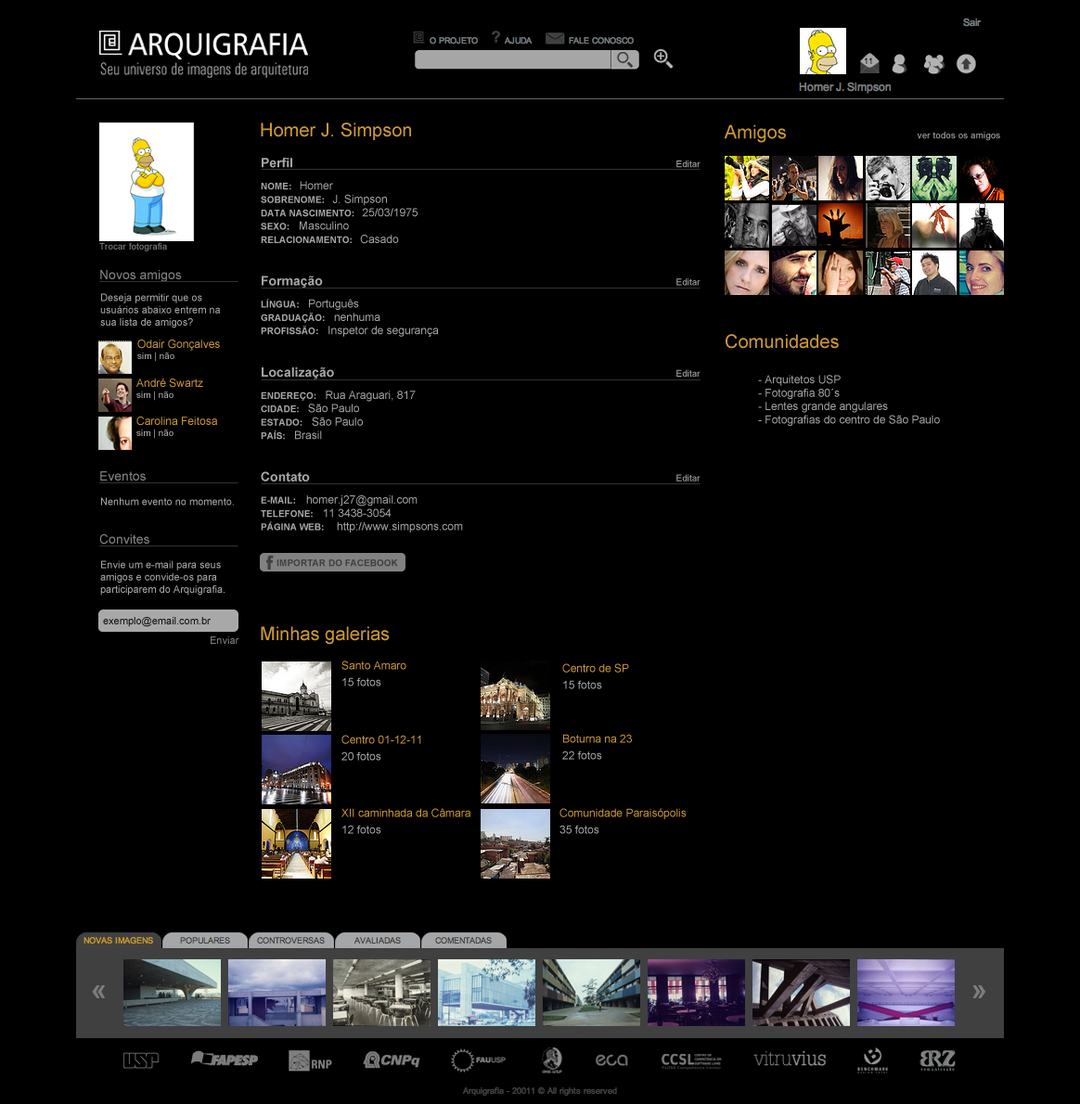
<style>
.page{position:relative;width:1080px;height:1104px;background:#000000}
.page>*{position:absolute;margin:0}
.t1{font:18.6px "ArialMT";color:#cb9833}
.t2{font:11.1px "ArialMT";color:#a6a6a6}
.t3{font:13px "Arial-BoldMT";color:#a6a6a6}
.t4{font:9.3px "ArialMT";color:#a6a6a6}
.t5{font:9.3px/22.3px "Arial-BoldMT";color:#a6a6a6}
.t6{font:11.1px/22.3px "ArialMT";color:#a6a6a6}
.t7{font:9.3px "Arial-BoldMT";color:#a6a6a6;text-transform:uppercase}
.t8{font:9.3px/22.3px "Arial-BoldMT";color:#a6a6a6;text-transform:uppercase}
.t9{font:9.3px "ArialMT";color:#818181}
.t10{font:13px "ArialMT";color:#818181}
.t11{font:10.2px "ArialMT";color:#a6a6a6}
.t12{font:11.1px "ArialMT";color:#cb9833}
.t13{font:10.2px "ArialMT";color:#111111}
.t14{font:10.2px "ArialMT";color:#818181}
.t15{font:11.1px/16.7px "ArialMT";color:#a8a8a8}
</style>
<div class="page">
<p class="t1" style="left:261px;top:122px;width:150px;height:18px">Homer J. Simpson</p>
<p class="t2" style="left:261px;top:158px;width:440px;height:375px"><span class="t3">Perfil                </span><span class="t4">Editar<br></span><span class="t5">NOME:   </span><span class="t6">Homer <br></span><span class="t7">Sobrenome:   </span>J. Simpson<br><span class="t7">Data Nascimento:   </span>25/03/1975 <br><span class="t7">Sexo:</span>   Masculino<br><span class="t7">Relacionamento:   </span>Casado<br><br><br><span class="t3">Formação               </span><span class="t4">Editar<br></span><span class="t8">Língua: </span><span class="t6">  Português<br></span><span class="t7">Graduação: </span>  nenhuma<br><span class="t7">Profissão:</span>   Inspetor de segurança<br><br><br><span class="t3">Localização              </span><span class="t4">Editar<br></span><span class="t8">Endereço: </span><span class="t6">  Rua Araguari, 817<br></span><span class="t7">Cidade: </span>  São Paulo<br><span class="t7">Estado:</span>   São Paulo<br><span class="t7">País: </span>  Brasil<br><br><br><span class="t3">Contato               </span><span class="t4">Editar<br></span><span class="t8">E-mail:    </span><span class="t6">homer.j27@gmail.com<br></span><span class="t7">Telefone:</span>   11 3438-3054<br><span class="t7">Página Web:</span>    http://www.simpsons.com</p>
<p class="t9" style="left:99px;top:242px;width:68px;height:9px">Trocar fotografia</p>
<p class="t10" style="left:100px;top:270px;width:82px;height:12px">Novos amigos</p>
<p class="t11" style="left:100px;top:293px;width:120px;height:35px">Deseja permitir que os usuários abaixo entrem na sua lista de amigos?</p>
<p class="t12" style="left:137px;top:340px;width:83px;height:22px">Odair Gonçalves<br><span class="t4">sim | não</span></p>
<p class="t12" style="left:136px;top:379px;width:67px;height:22px">André Swartz<br><span class="t4">sim | não</span></p>
<p class="t12" style="left:136px;top:417px;width:81px;height:22px">Carolina Feitosa<br><span class="t4">sim | não</span></p>
<p class="t10" style="left:100px;top:471px;width:46px;height:10px">Eventos</p>
<p class="t11" style="left:101px;top:497px;width:133px;height:9px">Nenhum evento no momento.</p>
<p class="t10" style="left:99px;top:534px;width:50px;height:11px">Convites</p>
<p class="t11" style="left:100px;top:560px;width:125px;height:36px">Envie um e-mail para seus amigos e convide-os para participarem do Arquigrafia.</p>
<p class="t13" style="left:103px;top:617px;width:108px;height:10px">exemplo@email.com.br</p>
<p class="t1" style="left:261px;top:626px;width:129px;height:19px">Minhas galerias</p>
<p class="t14" style="left:211px;top:636px;width:28px;height:8px">Enviar</p>
<p class="t12" style="left:341px;top:661px;width:65px;height:26px">Santo Amaro<br><span class="t15">15 fotos</span></p>
<p class="t12" style="left:562px;top:663px;width:67px;height:26px">Centro de SP<br><span class="t15">15 fotos</span></p>
<p class="t12" style="left:341px;top:735px;width:80px;height:26px">Centro 01-12-11<br><span class="t15">20 fotos</span></p>
<p class="t12" style="left:562px;top:734px;width:70px;height:26px">Boturna na 23<br><span class="t15">22 fotos</span></p>
<p class="t12" style="left:341px;top:808px;width:129px;height:26px">XII caminhada da Câmara<br><span class="t15">12 fotos</span></p>
<p class="t12" style="left:559px;top:808px;width:128px;height:26px">Comunidade Paraisópolis<br><span class="t15">35 fotos</span></p>
</div>
